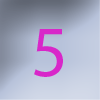
<style>
.page{position:relative;width:100px;height:100px}
.page>*{position:absolute;margin:0}
.t1{font:72px "MyriadPro-Regular";color:#d827c9}
</style>
<div class="page">
<p class="t1" style="left:34px;top:29px;width:29px;height:48px">5</p>
</div>
